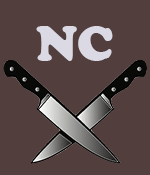
<style>
.page{position:relative;width:150px;height:175px;background:#533e3e}
.page>*{position:absolute;margin:0}
.t1{font:50px "CooperBlack";color:#dbd9e3}
</style>
<div class="page">
<p class="t1" style="left:36px;top:26px;width:77px;height:35px">NC</p>
</div>
